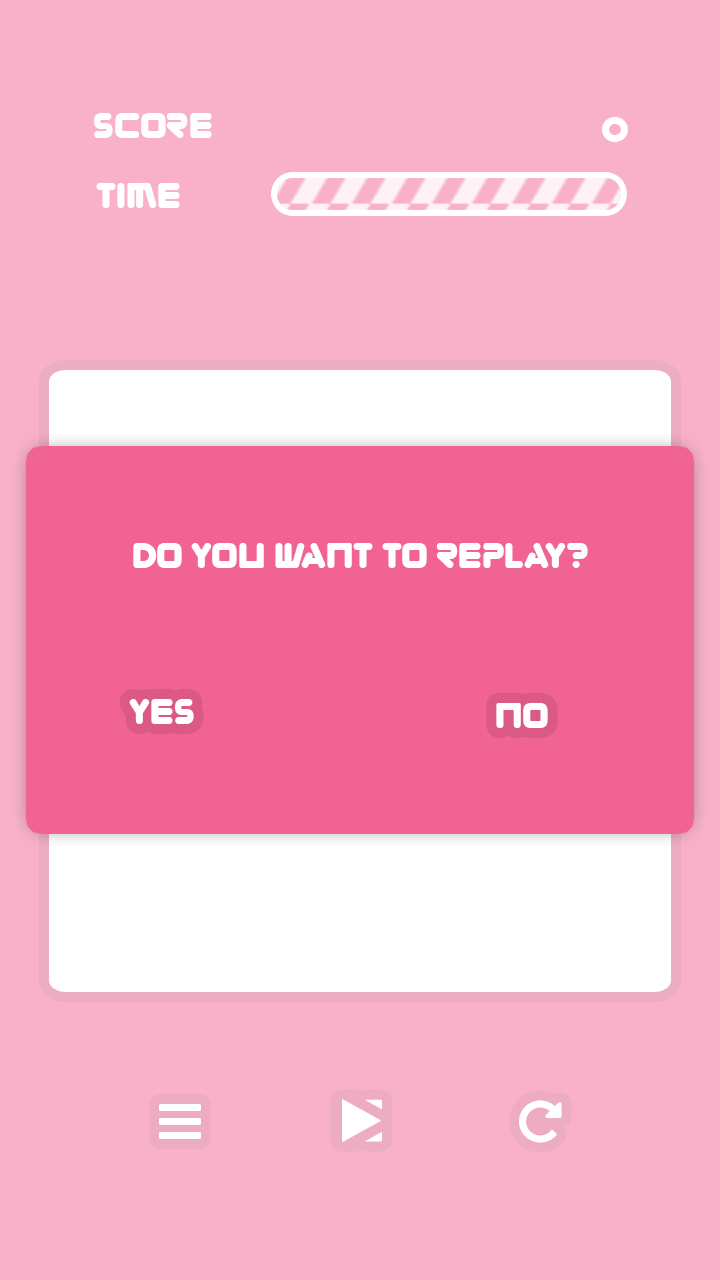
<style>
.page{position:relative;width:720px;height:1280px;background:#f8b1c9}
.page>*{position:absolute;margin:0}
.t1{font:36px "Zorque-Regular";color:#ffffff}
</style>
<div class="page">
<p class="t1" style="left:94px;top:113px;width:118px;height:25px">Score</p>
<p class="t1" style="left:602px;top:117px;width:26px;height:25px">0</p>
<p class="t1" style="left:96px;top:183px;width:84px;height:25px">TIME</p>
<p class="t1" style="left:133px;top:543px;width:455px;height:25px">do you want to replay?</p>
<p class="t1" style="left:129px;top:699px;width:65px;height:25px">yes</p>
<p class="t1" style="left:496px;top:703px;width:52px;height:25px">no</p>
</div>
